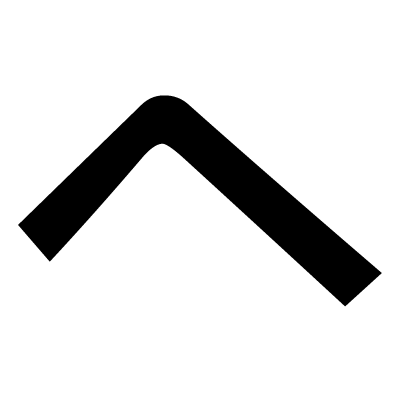
<style>
.page{position:relative;width:400px;height:400px;background:#ffffff}
.page>*{position:absolute;margin:0}
.t1{font:424.8px "MS-PGothic";color:#000000}
</style>
<div class="page">
<p class="t1" style="left:18px;top:95px;width:364px;height:212px">ヘ</p>
</div>
